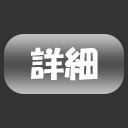
<style>
.page{position:relative;width:128px;height:128px;background:#333333}
.page>*{position:absolute;margin:0}
.t1{font:34.4px "HGSoeiKakupoptai";color:#ffffff}
</style>
<div class="page">
<p class="t1" style="left:31px;top:47px;width:67px;height:34px">詳細</p>
</div>
